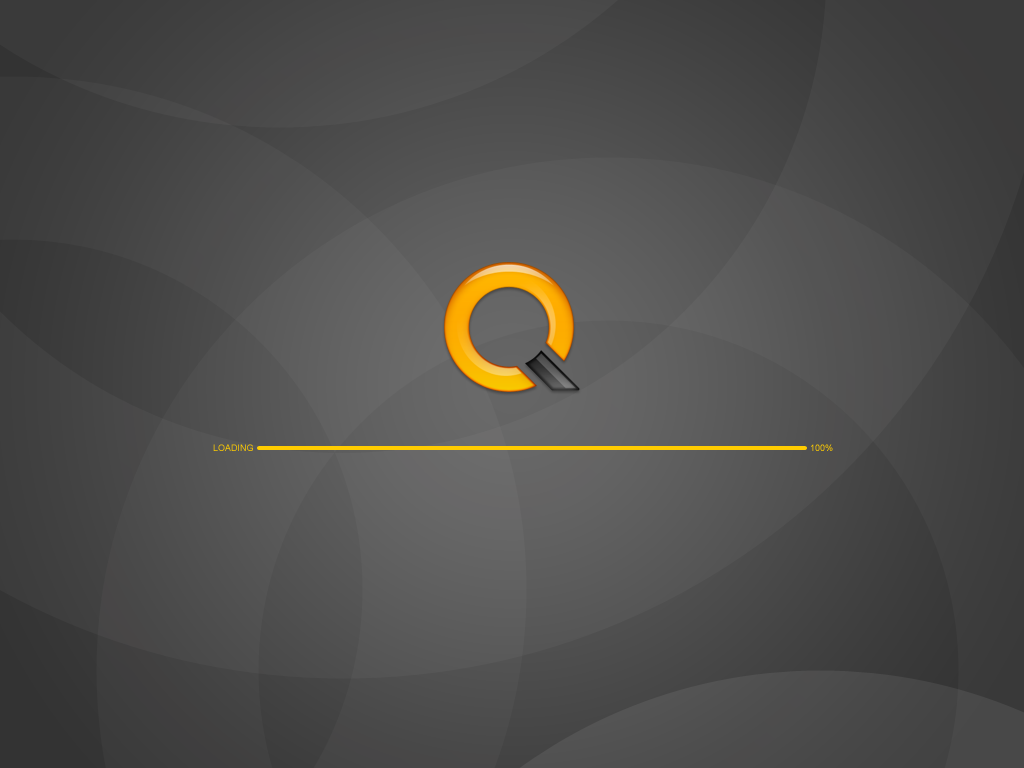
<style>
.page{position:relative;width:1024px;height:768px}
.page>*{position:absolute;margin:0}
.t1{font:9px "ArialMT";color:#ffcc00}
</style>
<div class="page">
<p class="t1" style="left:213px;top:444px;width:40px;height:7px">LOADING</p>
<p class="t1" style="left:811px;top:444px;width:22px;height:7px">100%</p>
</div>
